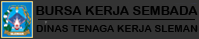
<style>
.page{position:relative;width:199px;height:39px;background:#333333}
.page>*{position:absolute;margin:0}
.t1{font:13px "ArialRoundedMTBold";color:#010101}
.t2{font:10.2px "ArialRoundedMTBold";color:#010101}
</style>
<div class="page">
<p class="t1" style="left:36px;top:6px;width:162px;height:9px">BURSA KERJA SEMBADA</p>
<p class="t2" style="left:36px;top:25px;width:162px;height:7px">DINAS TENAGA KERJA SLEMAN</p>
</div>
